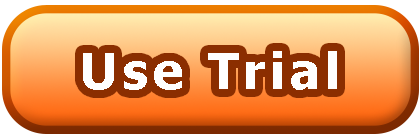
<style>
.page{position:relative;width:420px;height:135px}
.page>*{position:absolute;margin:0}
.t1{font:50px "Tahoma-Bold";letter-spacing:0.1em;color:#ffffff}
</style>
<div class="page">
<p class="t1" style="left:83px;top:51px;width:254px;height:39px">Use Trial</p>
</div>
